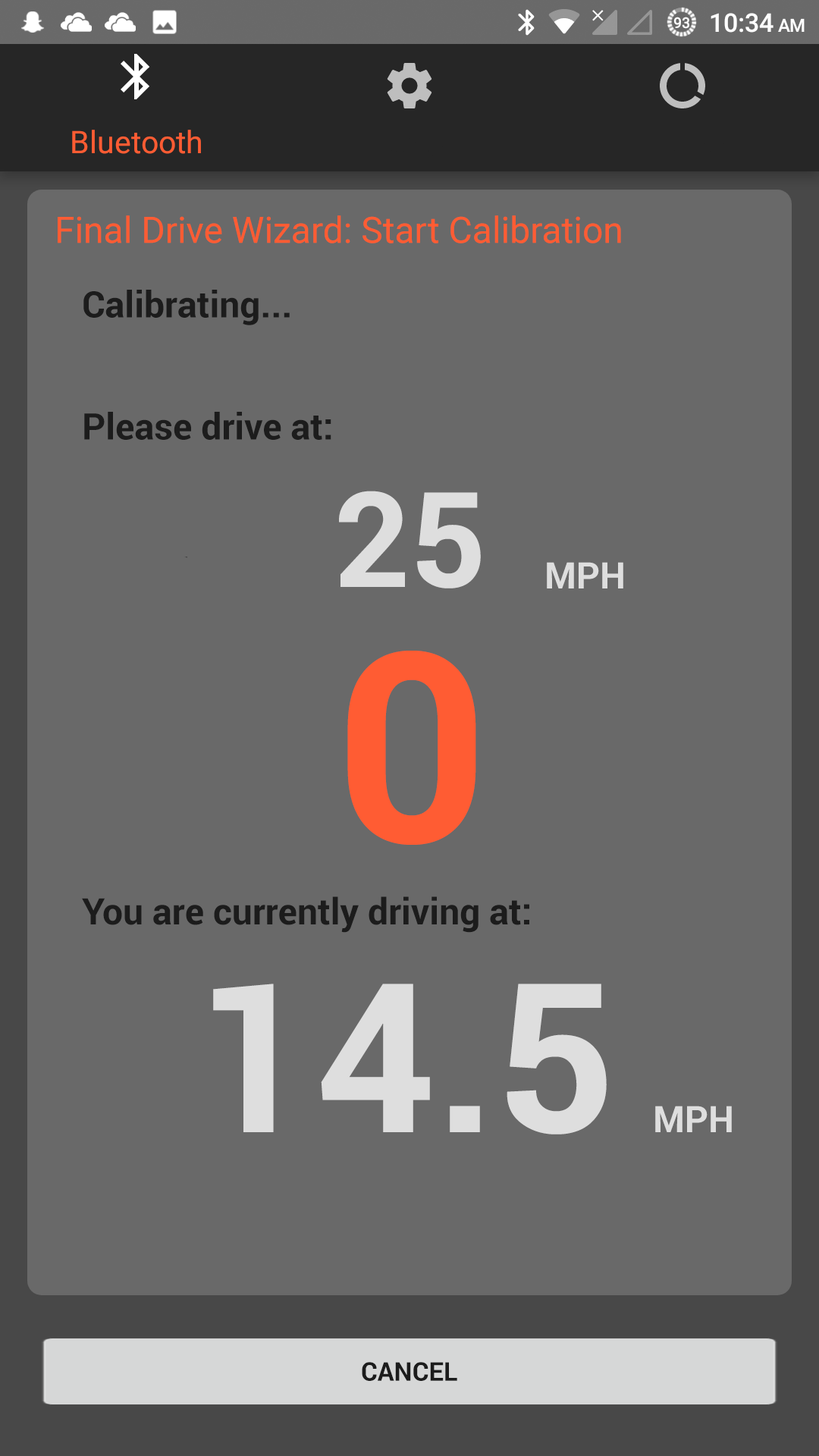
<style>
.page{position:relative;width:819px;height:1456px;background:#696969}
.page>*{position:absolute;margin:0}
.t1{font:36.4px "Roboto-Regular";color:#ff5c33}
.t2{font:36.4px "Roboto-Bold";color:#1c1c1c}
.t3{font:132.7px "Roboto-Bold";color:#dedede}
.t4{font:36.4px "Roboto-Bold";color:#dedede}
.t5{font:265.4px "Roboto-Bold";color:#ff5c33}
.t6{font:208.5px "Roboto-Bold";color:#dedede}
.t7{font:25.8px "Roboto-Bold";color:#1c1c1c}
</style>
<div class="page">
<p class="t1" style="left:58px;top:215px;width:563px;height:28px">Final Drive Wizard: Start Calibration</p>
<p class="t2" style="left:83px;top:290px;width:207px;height:35px">Calibrating...</p>
<p class="t2" style="left:84px;top:412px;width:247px;height:28px">Please drive at:</p>
<p class="t3" style="left:339px;top:491px;width:142px;height:97px">25</p>
<p class="t4" style="left:547px;top:562px;width:76px;height:26px">MPH</p>
<p class="t5" style="left:347px;top:651px;width:129px;height:194px">0</p>
<p class="t2" style="left:82px;top:896px;width:447px;height:37px">You are currently driving at:</p>
<p class="t6" style="left:213px;top:984px;width:394px;height:150px">14.5</p>
<p class="t4" style="left:655px;top:1106px;width:77px;height:26px">MPH</p>
<p class="t7" style="left:362px;top:1362px;width:95px;height:19px">CANCEL</p>
</div>
